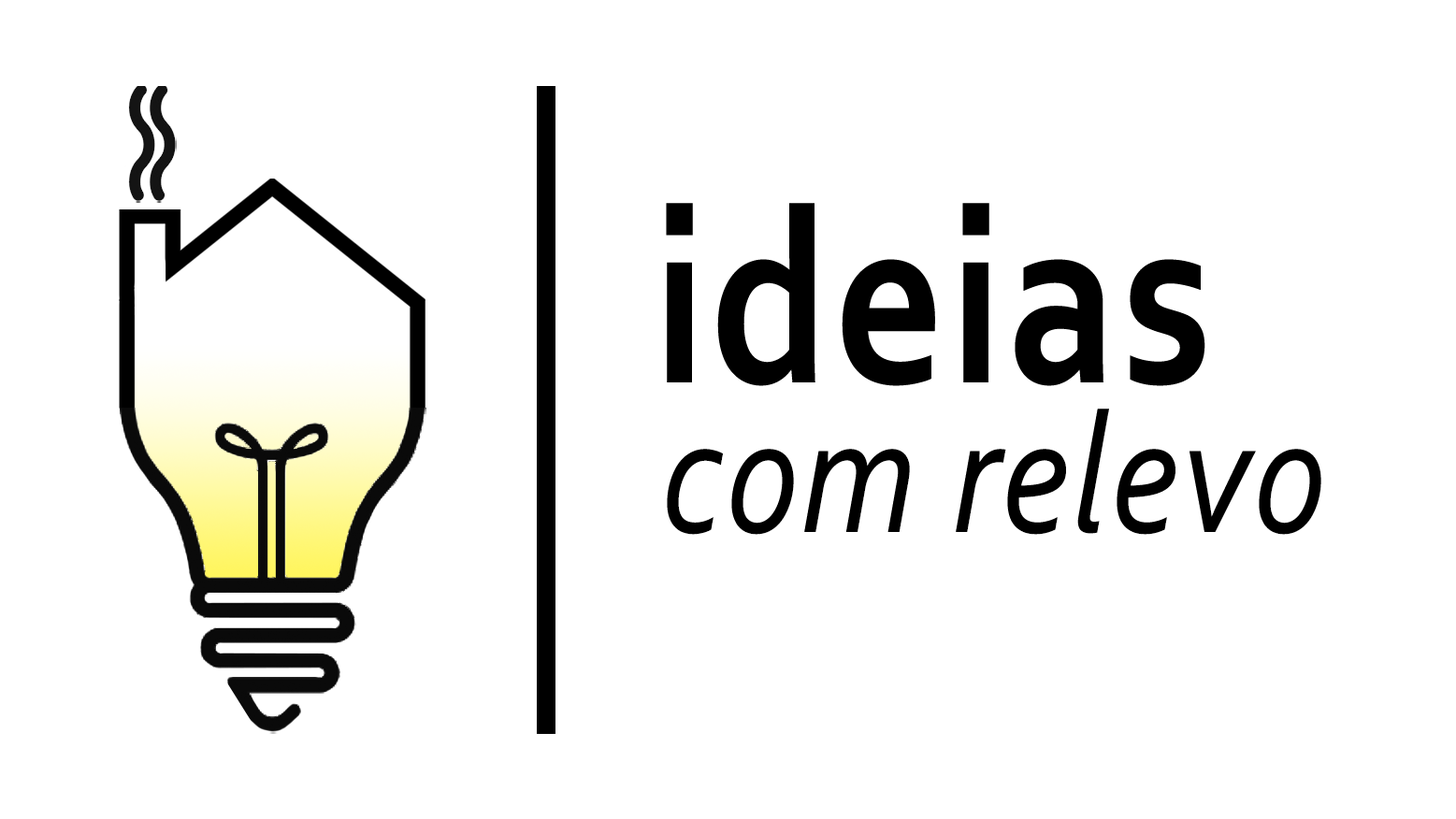
<style>
.page{position:relative;width:1456px;height:819px;background:#ffffff}
.page>*{position:absolute;margin:0}
.t1{font:253.8px "Corbel-Bold";letter-spacing:0.02em;color:#000000;scale:0.85 1}
.t2{font:127px "Corbel-Bold";letter-spacing:0.02em;color:#000000;scale:0.85 1}
.t3{font:174.3px "Corbel-Italic";letter-spacing:0.02em;color:#000000;scale:0.85 1}
</style>
<div class="page">
<p class="t1" style="left:666px;top:203px;width:539px;height:183px"><span class="t2"><br><br></span>ideias</p>
<p class="t3" style="left:667px;top:409px;width:654px;height:126px"><span class="t2"><br><br></span>com relevo</p>
</div>
